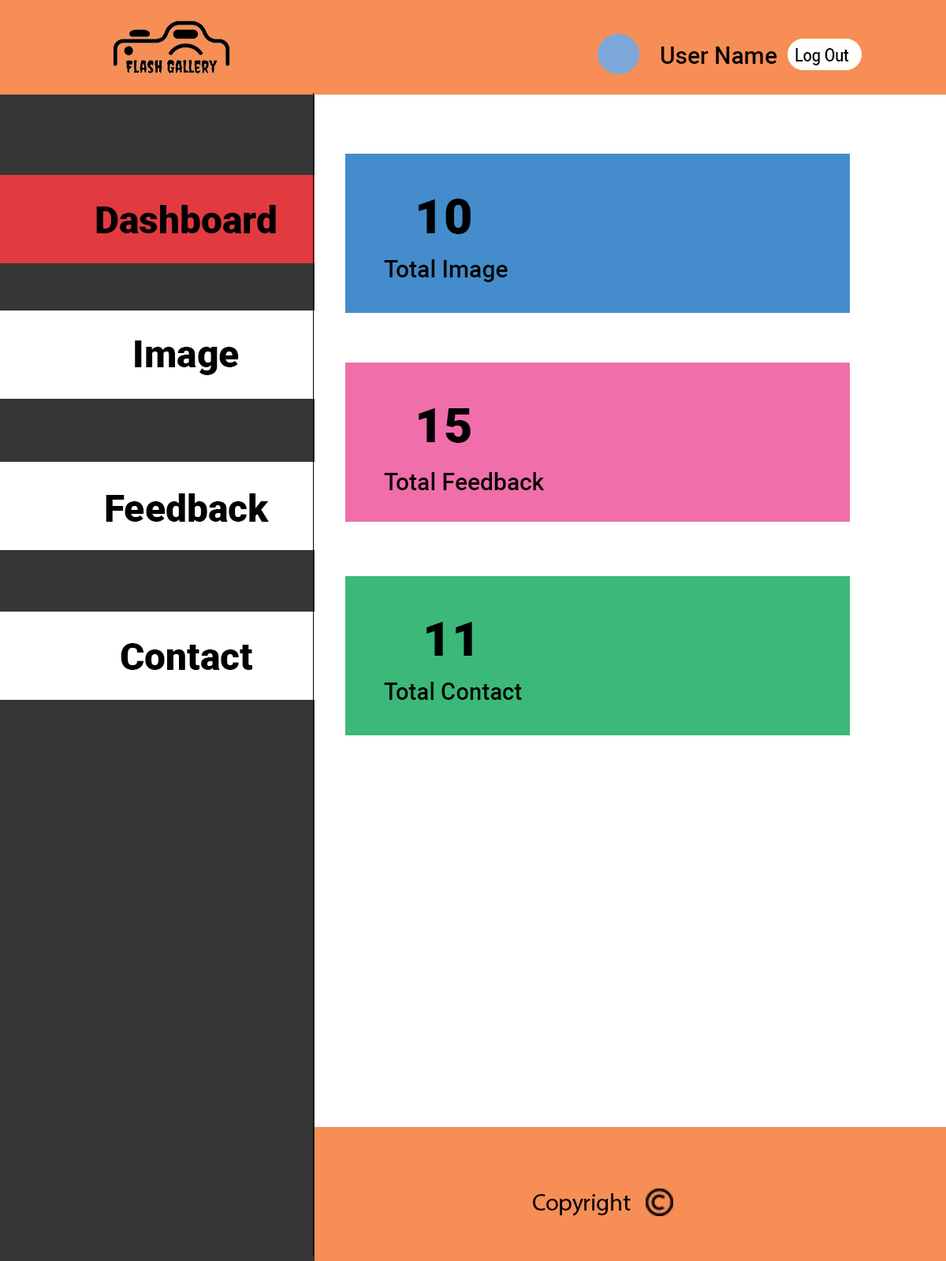
<style>
.page{position:relative;width:946px;height:1261px;background:#ffffff}
.page>*{position:absolute;margin:0}
.t1{font:23.6px "Roboto-Medium";color:#000000}
.t2{font:17.9px "Roboto-Medium";color:#000000;scale:0.86 1}
.t3{font:37.8px "Roboto-Black";color:#000000}
.t4{font:48.4px "Roboto-Black";color:#000000}
.t5{font:23.8px "MyriadHebrew-Regular";color:#000000}
</style>
<div class="page">
<p class="t1" style="left:660px;top:46px;width:117px;height:18px">User Name</p>
<p class="t2" style="left:795px;top:48px;width:54px;height:17px">Log Out</p>
<p class="t3" style="left:96px;top:205px;width:180px;height:28px">Dashboard</p>
<p class="t4" style="left:418px;top:199px;width:52px;height:35px">10</p>
<p class="t1" style="left:384px;top:259px;width:124px;height:23px">Total Image</p>
<p class="t3" style="left:135px;top:340px;width:104px;height:35px">Image</p>
<p class="t4" style="left:418px;top:408px;width:52px;height:35px">15</p>
<p class="t1" style="left:384px;top:472px;width:161px;height:18px">Total Feedback</p>
<p class="t3" style="left:106px;top:493px;width:163px;height:29px">Feedback</p>
<p class="t4" style="left:426px;top:622px;width:46px;height:34px">11</p>
<p class="t3" style="left:121px;top:643px;width:131px;height:27px">Contact</p>
<p class="t1" style="left:384px;top:682px;width:138px;height:18px">Total Contact</p>
<p class="t5" style="left:533px;top:1193px;width:97px;height:23px">Copyright</p>
</div>
